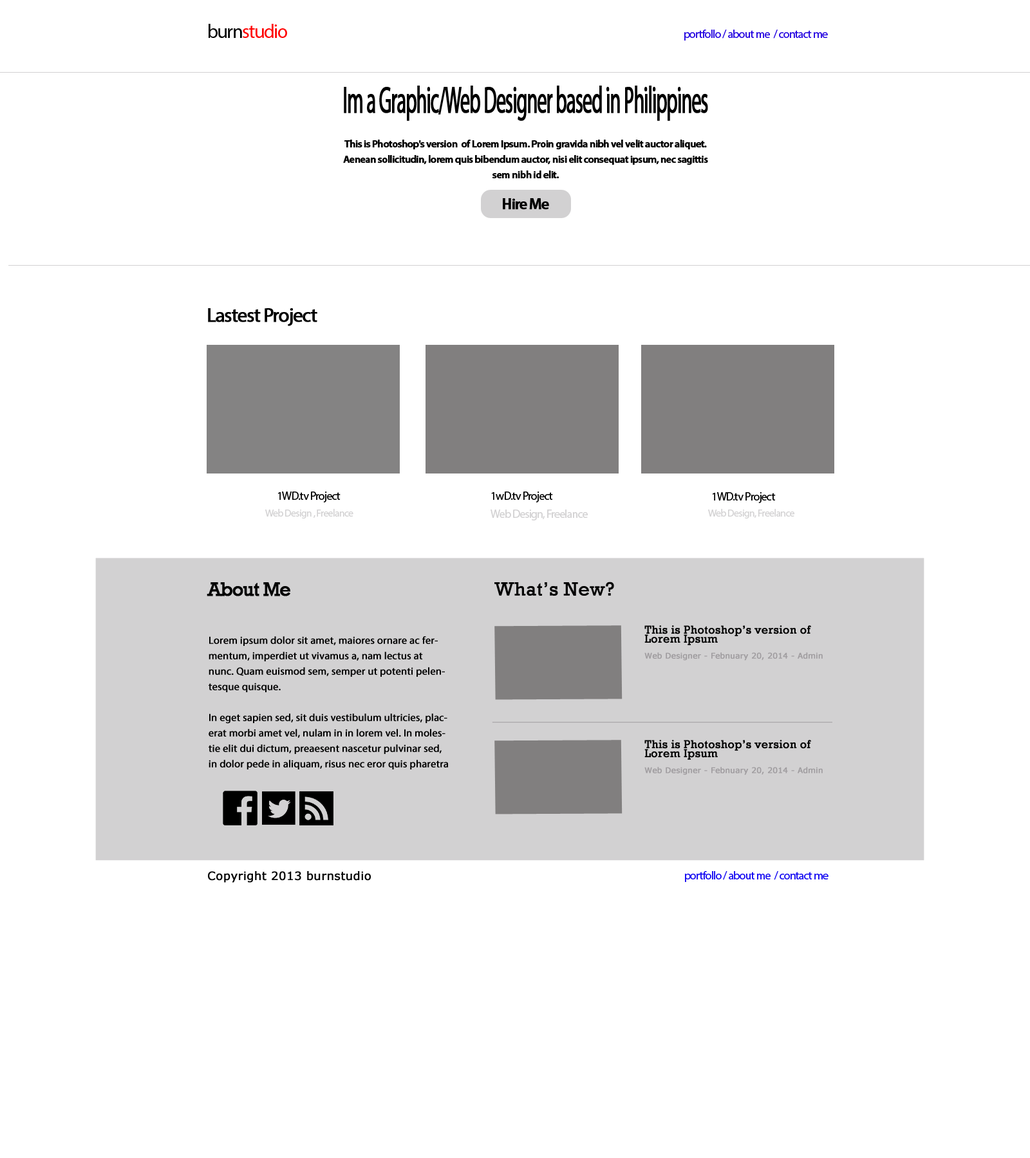
<style>
.page{position:relative;width:1030px;height:1158px;background:#ffffff}
.page>*{position:absolute;margin:0}
.t1{font:19.3px "MyriadPro-Regular";letter-spacing:-0.05em;color:#ff0000}
.t2{font:19.3px "MyriadPro-Regular";letter-spacing:-0.05em;color:#000000}
.t3{font:11.6px "MyriadPro-Regular";letter-spacing:-0.05em;color:#2000e0}
.t4{font:37.4px "MyriadPro-Regular";letter-spacing:-0.05em;color:#000000;font-weight:bold;scale:0.52 1}
.t5{font:10.3px/15.4px "MyriadPro-Semibold";letter-spacing:-0.05em;color:#000000;font-weight:bold}
.t6{font:15.4px "MyriadPro-Semibold";letter-spacing:-0.075em;color:#000000;font-weight:bold}
.t7{font:19.3px "MyriadPro-Regular";letter-spacing:-0.05em;color:#000000;font-weight:bold}
.t8{font:11.6px "MyriadPro-Regular";letter-spacing:-0.05em;color:#000000}
.t9{font:10.3px "MyriadPro-Regular";letter-spacing:-0.05em;color:#d2d1d2}
.t10{font:11.6px "MyriadPro-Regular";letter-spacing:-0.05em;color:#d2d1d2}
.t11{font:19.3px "Rockwell";color:#040404;font-weight:bold}
.t12{font:19.3px "Rockwell";letter-spacing:-0.05em;color:#040404;font-weight:bold}
.t13{font:11.6px/9px "Rockwell";color:#040404;font-weight:bold}
.t14{font:10.3px/15.4px "MyriadPro-Regular";color:#040404;font-weight:bold}
.t15{font:7.7px "Verdana";color:#a09da0;font-weight:bold}
.t16{font:11.6px "Verdana";color:#040404;font-weight:bold}
.t17{font:11.6px "MyriadPro-Regular";letter-spacing:-0.05em;color:#1106f2}
</style>
<div class="page">
<p class="t1" style="left:208px;top:24px;width:79px;height:14px"><span class="t2">burn</span>studio</p>
<p class="t3" style="left:684px;top:30px;width:143px;height:11px">portfollo / about me  / contact me</p>
<p class="t4" style="left:344px;top:86px;width:364px;height:35px">Im a Graphic/Web Designer based in Philippines</p>
<p class="t5" style="left:343px;top:140px;width:365px;height:39px;text-align:center">This is Photoshop's version  of Lorem Ipsum. Proin gravida nibh vel velit auctor aliquet. Aenean sollicitudin, lorem quis bibendum auctor, nisi elit consequat ipsum, nec sagittis sem nibh id elit.</p>
<p class="t6" style="left:503px;top:198px;width:46px;height:12px">Hire Me</p>
<p class="t7" style="left:208px;top:308px;width:109px;height:18px">Lastest Project</p>
<p class="t8" style="left:278px;top:492px;width:62px;height:11px">1WD.tv Project</p>
<p class="t8" style="left:491px;top:492px;width:62px;height:11px">1wD.tv Project</p>
<p class="t8" style="left:712px;top:492px;width:63px;height:11px">1WD.tv Project</p>
<p class="t9" style="left:265px;top:509px;width:88px;height:10px">Web Design , Freelance</p>
<p class="t10" style="left:490px;top:510px;width:97px;height:11px">Web Design, Freelance</p>
<p class="t9" style="left:708px;top:509px;width:86px;height:10px">Web Design, Freelance</p>
<p class="t11" style="left:494px;top:582px;width:120px;height:14px">What’s New?</p>
<p class="t12" style="left:207px;top:582px;width:83px;height:14px">About Me</p>
<p class="t13" style="left:644px;top:625px;width:167px;height:20px">This is Photoshop’s version of Lorem Ipsum</p>
<p class="t14" style="left:208px;top:636px;width:240px;height:134px">Lorem ipsum dolor sit amet, maiores ornare ac fermentum, imperdiet ut vivamus a, nam lectus at nunc. Quam euismod sem, semper ut potenti pelentesque quisque.<br><br>In eget sapien sed, sit duis vestibulum ultricies, placerat morbi amet vel, nulam in in lorem vel. In molestie elit dui dictum, preaesent nascetur pulvinar sed, in dolor pede in aliquam, risus nec eror quis pharetra</p>
<p class="t15" style="left:644px;top:652px;width:178px;height:9px">Web Designer - Febnuary 20, 2014 - Admin</p>
<p class="t13" style="left:644px;top:740px;width:167px;height:20px">This is Photoshop’s version of Lorem Ipsum</p>
<p class="t15" style="left:644px;top:767px;width:178px;height:8px">Web Designer - Febnuary 20, 2014 - Admin</p>
<p class="t16" style="left:208px;top:871px;width:163px;height:12px">Copyright 2013 burnstudio</p>
<p class="t17" style="left:685px;top:871px;width:143px;height:11px">portfollo / about me  / contact me</p>
</div>
